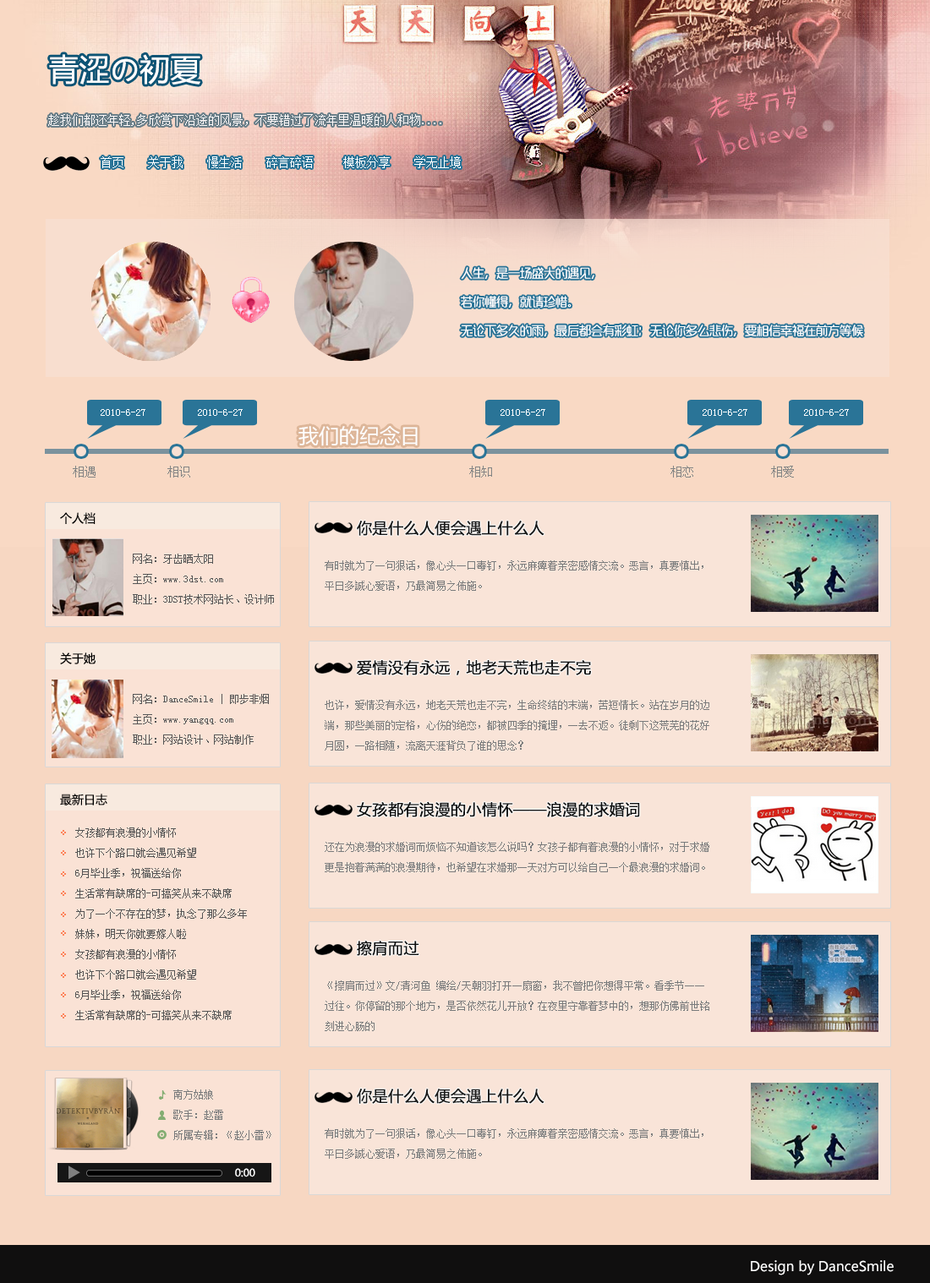
<style>
.page{position:relative;width:930px;height:1283px}
.page>*{position:absolute;margin:0}
.t1{font:30.4px "MicrosoftYaHei";color:#ffffff}
.t2{font:11.8px "SimSun";color:#fffafa}
.t3{font:11.8px "SimSun";color:#ffffff}
.t4{font:11.8px/28.7px "MFLangQian_Noncommercial-Light";color:#ffffff}
.t5{font:10.1px "SimSun";color:#ffffff}
.t6{font:20.3px "MicrosoftYaHei";color:#ffffff}
.t7{font:11.8px "SimSun";color:#828484}
.t8{font:11.8px "MicrosoftYaHei";color:#000000}
.t9{font:15.2px "MicrosoftYaHei";color:#171717;font-weight:bold}
.t10{font:10.1px/20.3px "SimSun";color:#565656}
.t11{font:10.1px/20.3px "SimSun";color:#797b7c}
.t12{font:15.2px "MicrosoftYaHei";color:#121212;font-weight:bold}
.t13{font:15.2px "MicrosoftYaHei";color:#101010;font-weight:bold}
.t14{font:10.1px/20.3px "SimSun";color:#555555}
.t15{font:15.2px "MicrosoftYaHei";color:#0c0c0c;font-weight:bold}
.t16{font:15.2px "MicrosoftYaHei";color:#191918;font-weight:bold}
.t17{font:10.1px "MicrosoftYaHei";color:#fbfbfb}
.t18{font:13.5px "MicrosoftYaHei";color:#ffffff}
</style>
<div class="page">
<p class="t1" style="left:49px;top:54px;width:151px;height:31px">青涩の初夏</p>
<p class="t2" style="left:48px;top:114px;width:393px;height:12px">趁我们都还年轻,多欣赏下沿途的风景，不要错过了流年里温暖的人和物....</p>
<p class="t3" style="left:101px;top:156px;width:360px;height:12px">首页    关于我    慢生活    碎言碎语     模板分享    学无止境</p>
<p class="t4" style="left:461px;top:267px;width:402px;height:69px">人生，是一场盛大的遇见，<br>若你懂得，就请珍惜。<br>无论下多久的雨，最后都会有彩虹；无论你多么悲伤，要相信幸福在前方等候</p>
<p class="t5" style="left:101px;top:409px;width:44px;height:7px">2010-6-27</p>
<p class="t5" style="left:198px;top:409px;width:45px;height:7px">2010-6-27</p>
<p class="t5" style="left:500px;top:409px;width:45px;height:7px">2010-6-27</p>
<p class="t5" style="left:702px;top:409px;width:45px;height:7px">2010-6-27</p>
<p class="t5" style="left:804px;top:409px;width:44px;height:7px">2010-6-27</p>
<p class="t6" style="left:298px;top:426px;width:119px;height:20px">我们的纪念日</p>
<p class="t7" style="left:73px;top:466px;width:721px;height:11px">相遇            相识                                               相知                              相恋             相爱</p>
<p class="t8" style="left:60px;top:512px;width:35px;height:12px">个人档</p>
<p class="t9" style="left:357px;top:521px;width:187px;height:15px">你是什么人便会遇上什么人</p>
<p class="t10" style="left:133px;top:554px;width:141px;height:50px">网名：牙齿晒太阳<br>主页：www.3dst.com<br>职业：3DST技术网站长、设计师</p>
<p class="t11" style="left:325px;top:560px;width:378px;height:31px">有时就为了一句狠话，像心头一口毒钉，永远麻痺着亲密感情交流。恶言，真要慎出，平日多誠心爱语，乃最简易之佈施。</p>
<p class="t8" style="left:60px;top:652px;width:35px;height:12px">关于她</p>
<p class="t12" style="left:356px;top:660px;width:235px;height:15px">爱情没有永远，地老天荒也走不完</p>
<p class="t10" style="left:133px;top:694px;width:136px;height:50px">网名：DanceSmile | 即步非烟<br>主页：www.yangqq.com<br>职业：网站设计、网站制作</p>
<p class="t11" style="left:325px;top:700px;width:384px;height:50px">也许，爱情没有永远，地老天荒也走不完，生命终结的末端，苦短情长。站在岁月的边端，那些美丽的定格，心伤的绝恋，都被四季的掩埋，一去不返。徒剩下这荒芜的花好月圆，一路相随，流离天涯背负了谁的思念？</p>
<p class="t8" style="left:60px;top:794px;width:47px;height:11px">最新日志</p>
<p class="t13" style="left:357px;top:801px;width:283px;height:16px">女孩都有浪漫的小情怀——浪漫的求婚词</p>
<p class="t14" style="left:75px;top:827px;width:172px;height:193px">女孩都有浪漫的小情怀<br>也许下个路口就会遇见希望<br>6月毕业季，祝福送给你<br>生活常有缺席的-可搞笑从来不缺席<br>为了一个不存在的梦，执念了那么多年<br>妹妹，明天你就要嫁人啦<br>女孩都有浪漫的小情怀<br>也许下个路口就会遇见希望<br>6月毕业季，祝福送给你<br>生活常有缺席的-可搞笑从来不缺席</p>
<p class="t11" style="left:325px;top:842px;width:384px;height:30px">还在为浪漫的求婚词而烦恼不知道该怎么说吗？女孩子都有着浪漫的小情怀，对于求婚更是抱着满满的浪漫期待，也希望在求婚那一天对方可以给自己一个最浪漫的求婚词。</p>
<p class="t15" style="left:357px;top:941px;width:62px;height:15px">擦肩而过</p>
<p class="t11" style="left:325px;top:980px;width:384px;height:51px">《擦肩而过》文/清河鱼 编绘/天朝羽打开一扇窗，我不曾把你想得平常。看季节一一过往。你停留的那个地方，是否依然花儿开放？在夜里守靠着梦中的，想那仿佛前世铭刻进心肠的</p>
<p class="t11" style="left:173px;top:1089px;width:98px;height:51px">南方姑娘<br>歌手：赵雷<br>所属专辑：《赵小雷》</p>
<p class="t16" style="left:357px;top:1088px;width:187px;height:16px">你是什么人便会遇上什么人</p>
<p class="t11" style="left:325px;top:1128px;width:378px;height:31px">有时就为了一句狠话，像心头一口毒钉，永远麻痺着亲密感情交流。恶言，真要慎出，平日多誠心爱语，乃最简易之佈施。</p>
<p class="t17" style="left:235px;top:1168px;width:20px;height:9px">0:00</p>
<p class="t18" style="left:750px;top:1260px;width:143px;height:15px">Design by DanceSmile</p>
</div>
